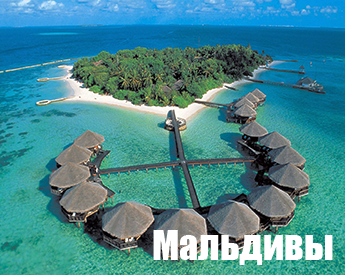
<style>
.page{position:relative;width:345px;height:275px}
.page>*{position:absolute;margin:0}
.t1{font:38px "Impact";color:#ffffff}
</style>
<div class="page">
<p class="t1" style="left:153px;top:230px;width:180px;height:35px">Мальдивы</p>
</div>
